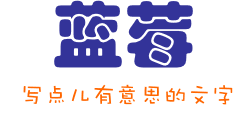
<style>
.page{position:relative;width:252px;height:123px;background:#ffffff}
.page>*{position:absolute;margin:0}
.t1{font:72px "STHupo";color:#333399}
.t2{font:24px "DFWaWaSC-W5";color:#ff6600}
</style>
<div class="page">
<p class="t1" style="left:54px;top:0px;width:139px;height:68px">蓝莓</p>
<p class="t2" style="left:23px;top:84px;width:210px;height:21px">写点儿有意思的文字</p>
</div>
